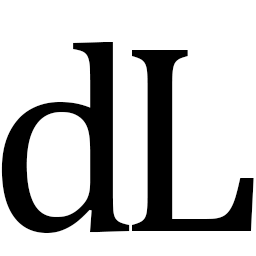
<style>
.page{position:relative;width:256px;height:256px;background:#ffffff}
.page>*{position:absolute;margin:0}
.t1{font:270.8px "CambriaMath";color:#000000}
</style>
<div class="page">
<p class="t1" style="left:1px;top:42px;width:129px;height:191px">d</p>
<p class="t1" style="left:132px;top:50px;width:122px;height:181px">L</p>
</div>
